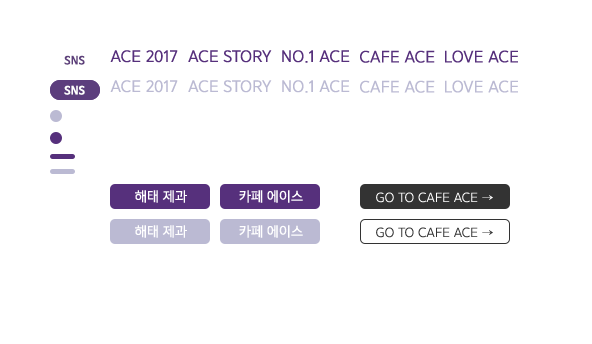
<style>
.page{position:relative;width:592px;height:344px;background:#ffffff}
.page>*{position:absolute;margin:0}
.t1{font:15px "YoonGothicPro750";letter-spacing:0.015em;color:#56307c}
.t2{font:11px "NanumBarunGothicBold";color:#5d3e7b}
.t3{font:11px "NanumBarunGothicBold";color:#ffffff}
.t4{font:15px "YoonGothicPro750";letter-spacing:0.015em;color:#bbbad3}
.t5{font:13px "YoonGothicPro750";letter-spacing:0.015em;color:#ffffff;scale:0.97 1}
.t6{font:13px "YoonGothicPro730";color:#ffffff}
.t7{font:13px "YoonGothicPro730";color:#333333}
</style>
<div class="page">
<p class="t1" style="left:110px;top:50px;width:68px;height:13px">ACE 2017</p>
<p class="t1" style="left:188px;top:50px;width:84px;height:13px">ACE STORY</p>
<p class="t1" style="left:282px;top:50px;width:68px;height:13px">NO.1 ACE</p>
<p class="t1" style="left:360px;top:50px;width:75px;height:13px">CAFE ACE</p>
<p class="t1" style="left:445px;top:50px;width:73px;height:13px">LOVE ACE</p>
<p class="t2" style="left:64px;top:55px;width:21px;height:10px">SNS</p>
<p class="t3" style="left:64px;top:85px;width:21px;height:10px">SNS</p>
<p class="t4" style="left:110px;top:80px;width:68px;height:13px">ACE 2017</p>
<p class="t4" style="left:188px;top:80px;width:84px;height:13px">ACE STORY</p>
<p class="t4" style="left:282px;top:80px;width:68px;height:13px">NO.1 ACE</p>
<p class="t4" style="left:360px;top:80px;width:75px;height:13px">CAFE ACE</p>
<p class="t4" style="left:445px;top:80px;width:73px;height:13px">LOVE ACE</p>
<p class="t5" style="left:135px;top:190px;width:52px;height:13px">해태 제과</p>
<p class="t5" style="left:239px;top:190px;width:64px;height:13px">카페 에이스</p>
<p class="t6" style="left:376px;top:192px;width:117px;height:11px">GO TO CAFE ACE →</p>
<p class="t5" style="left:135px;top:225px;width:52px;height:13px">해태 제과</p>
<p class="t5" style="left:239px;top:225px;width:64px;height:13px">카페 에이스</p>
<p class="t7" style="left:376px;top:227px;width:117px;height:11px">GO TO CAFE ACE →</p>
</div>
